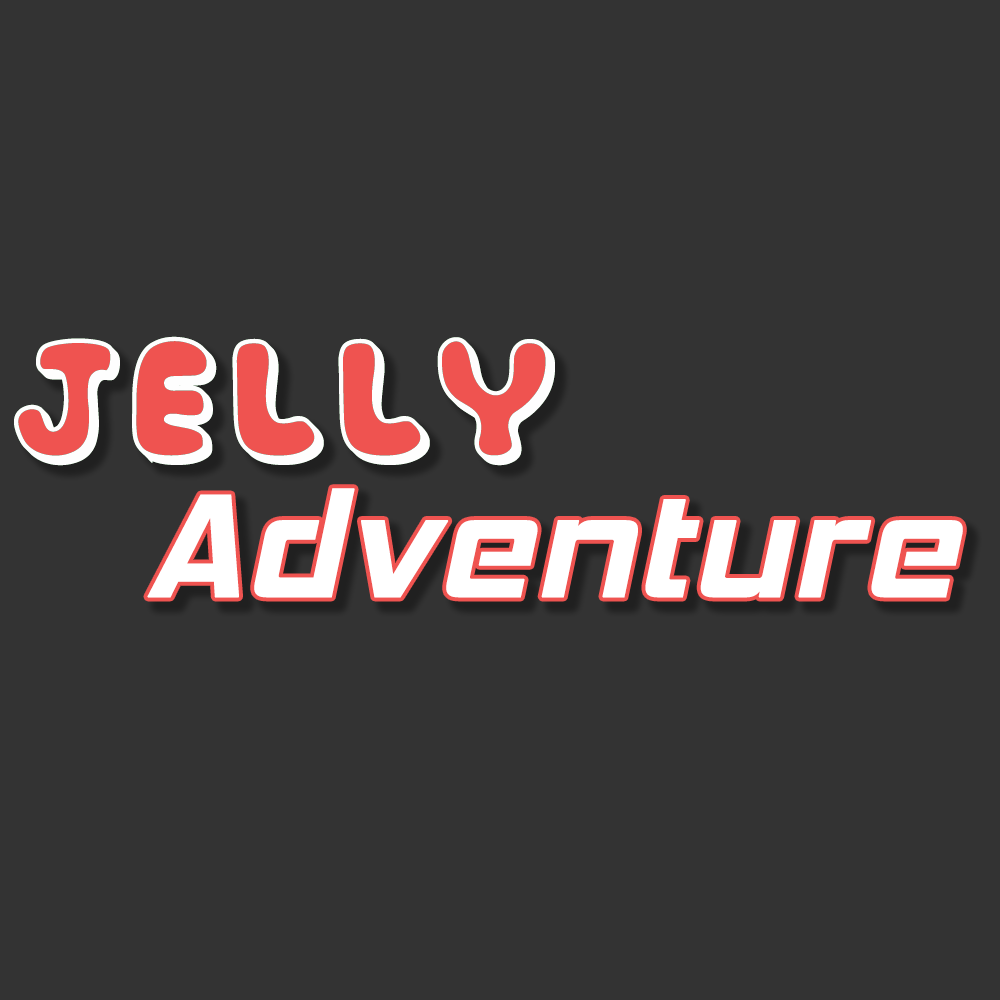
<style>
.page{position:relative;width:1000px;height:1000px;background:#333333}
.page>*{position:absolute;margin:0}
.t1{font:150px "Amender_Tu";color:#fefefe;font-weight:bold}
.t2{font:150px "SVN-HemiHead";color:#ffffff;font-weight:bold}
</style>
<div class="page">
<p class="t1" style="left:14px;top:336px;width:541px;height:130px">Jelly</p>
<p class="t2" style="left:147px;top:488px;width:816px;height:110px">Adventure</p>
</div>
